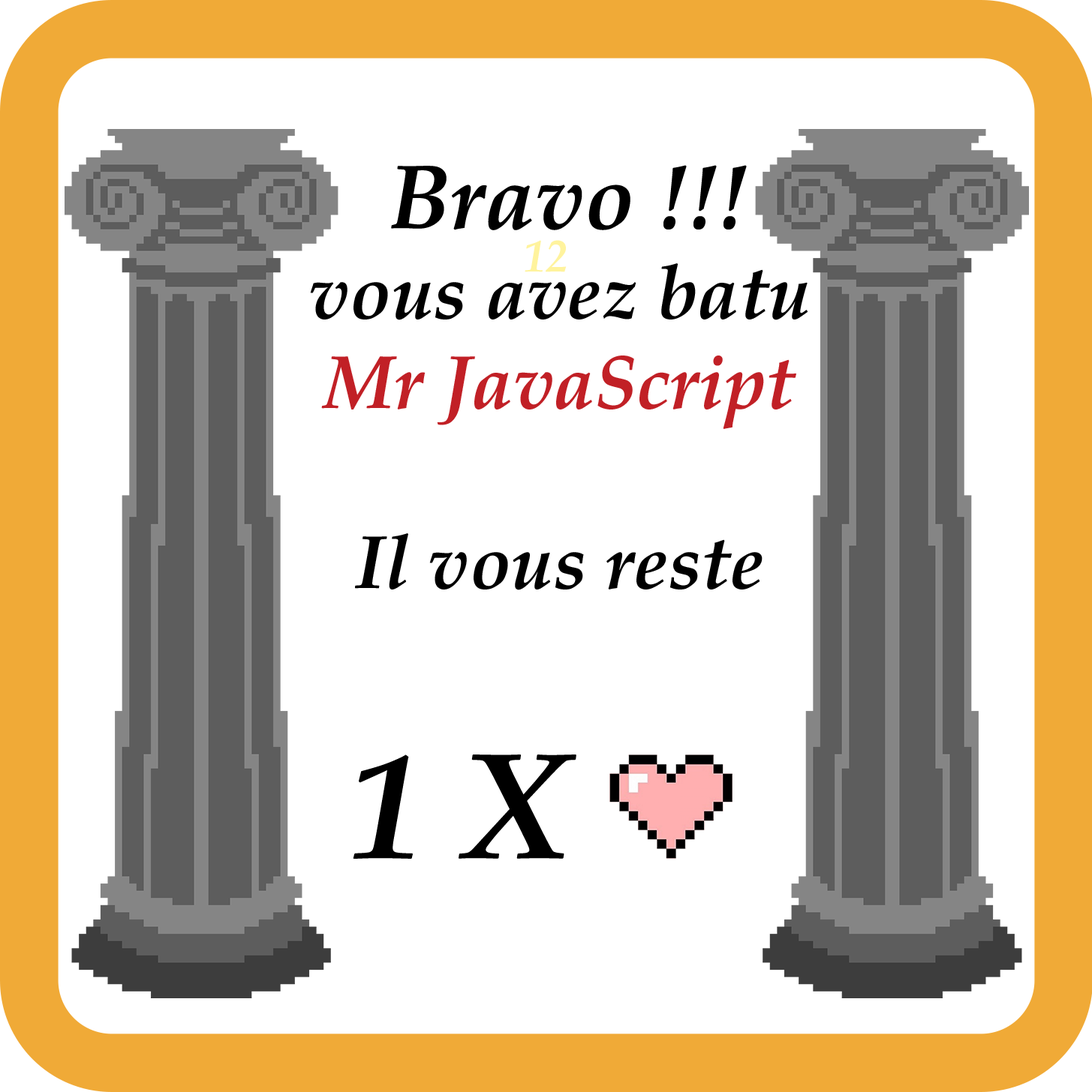
<style>
.page{position:relative;width:1092px;height:1092px;background:#ffffff}
.page>*{position:absolute;margin:0}
.t1{font:75px "PalatinoLinotype-BoldItalic";color:#000000}
.t2{font:90px "PalatinoLinotype-BoldItalic";color:#000000}
.t3{font:75px "PalatinoLinotype-BoldItalic";color:#c12026}
.t4{font:150px "PalatinoLinotype-BoldItalic";color:#000000}
.t5{font:45px "PalatinoLinotype-BoldItalic";color:#fff39d}
</style>
<div class="page">
<p class="t1" style="left:310px;top:165px;width:497px;height:694px;text-align:center"><span class="t2">Bravo !!!<br></span>vous avez batu <br><span class="t3">Mr JavaScript</span> <br><br>Il vous reste <br><br><span class="t4">1 X</span></p>
<p class="t5" style="left:524px;top:240px;width:42px;height:32px">12</p>
</div>
